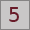
<style>
.page{position:relative;width:30px;height:30px;background:#c9c7c7}
.page>*{position:absolute;margin:0}
.t1{font:20.8px "Menlo-Regular";color:#691b29}
</style>
<div class="page">
<p class="t1" style="left:9px;top:7px;width:10px;height:15px">5</p>
</div>
